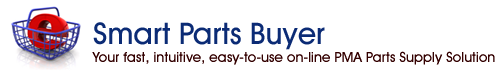
<style>
.page{position:relative;width:503px;height:75px;background:#ffffff}
.page>*{position:absolute;margin:0}
.t1{font:30px "AvantGardeITCbyBT-Medium";color:#0b2b75}
.t2{font:14px "AvantGardeITCbyBT-Medium";color:#330000}
</style>
<div class="page">
<p class="t1" style="left:93px;top:22px;width:232px;height:28px">Smart Parts Buyer</p>
<p class="t2" style="left:92px;top:51px;width:403px;height:14px">Your fast, intuitive, easy-to-use on-line PMA Parts Supply Solution</p>
</div>
